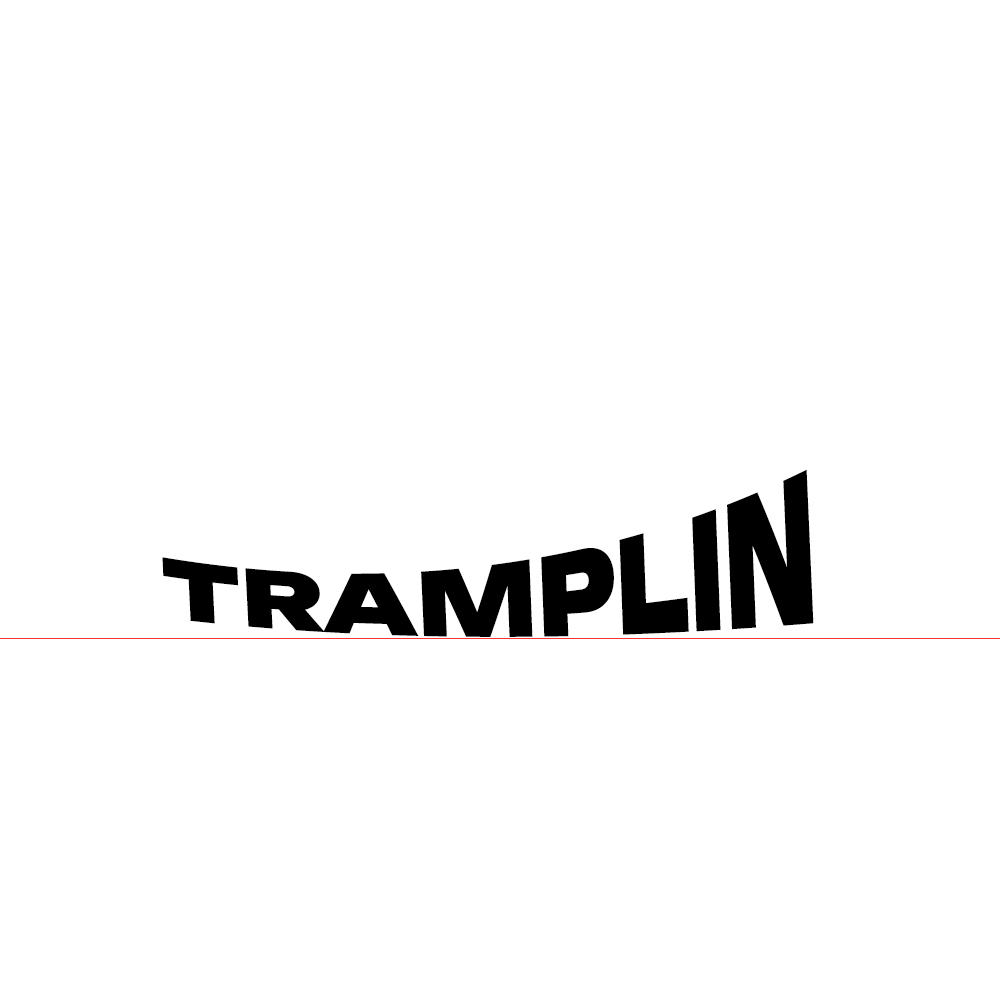
<style>
.page{position:relative;width:1000px;height:1000px;background:#ffffff}
.page>*{position:absolute;margin:0}
.t1{font:144.8px "Bounded-Black";color:#000000;scale:0.65 1}
</style>
<div class="page">
<p class="t1" style="left:162px;top:469px;width:652px;height:168px;rotate:-3deg">TRAMPLIN</p>
</div>
